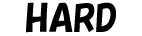
<style>
.page{position:relative;width:142px;height:36px;background:#ffffff}
.page>*{position:absolute;margin:0}
.t1{font:36px "HGPSoeiKakupoptai";color:#000000}
</style>
<div class="page">
<p class="t1" style="left:25px;top:2px;width:91px;height:31px">HARD</p>
</div>
